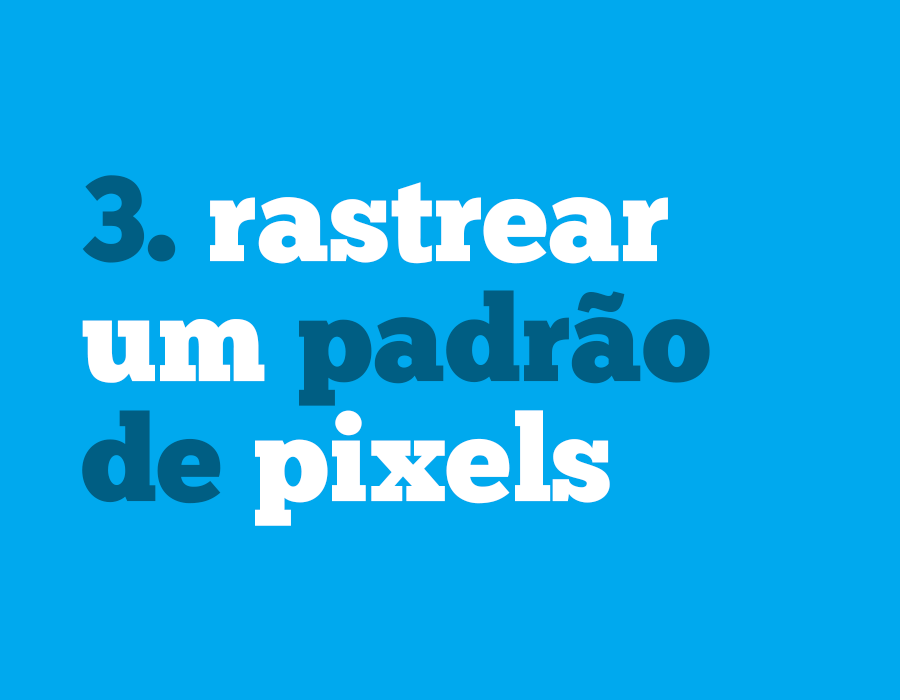
<style>
.page{position:relative;width:900px;height:700px;background:#00a9ee}
.page>*{position:absolute;margin:0}
.t1{font:120.7px/120px "ChunkFive-Roman";color:#ffffff}
.t2{font:120.7px/120px "ChunkFive-Roman";color:#005e83}
.t3{font:106.6px "GothamUltra";color:#005e83}
</style>
<div class="page">
<p class="t1" style="left:82px;top:175px;width:628px;height:351px"><span class="t2">3. </span>rastrear<br>um <span class="t2">padrao<br>de </span>pixels</p>
<p class="t3" style="left:577px;top:291px;width:48px;height:22px">~</p>
</div>
